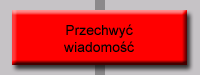
<style>
.page{position:relative;width:200px;height:75px;background:#ff0000}
.page>*{position:absolute;margin:0}
.t1{font:14px "ArialMT";color:#000000}
</style>
<div class="page">
<p class="t1" style="left:64px;top:24px;width:70px;height:28px;text-align:center">Przechwyć<br>wiadomość</p>
</div>
